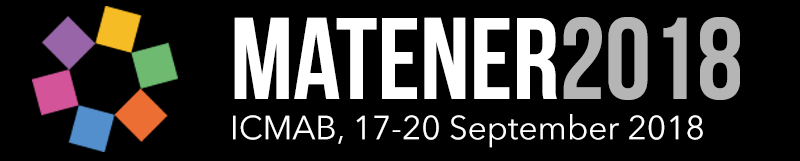
<style>
.page{position:relative;width:800px;height:161px;background:#000000}
.page>*{position:absolute;margin:0}
.t1{font:115.8px "BebasNeueBold";color:#ffffff}
.t2{font:115.8px "BebasNeueBold";color:#b5b5b5}
.t3{font:33.3px "AvenirNextLTPro-Regular";color:#fefefe}
</style>
<div class="page">
<p class="t1" style="left:234px;top:17px;width:506px;height:83px">maTENER<span class="t2">2018</span></p>
<p class="t3" style="left:233px;top:114px;width:470px;height:34px">ICMAB, 17-20 September 2018</p>
</div>
